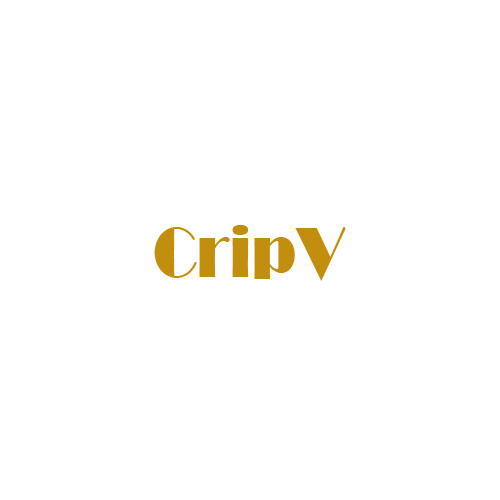
<style>
.page{position:relative;width:500px;height:500px;background:#ffffff}
.page>*{position:absolute;margin:0}
.t1{font:72.8px "Broadway";color:#c28e0e;scale:0.85 1}
</style>
<div class="page">
<p class="t1" style="left:154px;top:225px;width:192px;height:56px">CripV</p>
</div>
